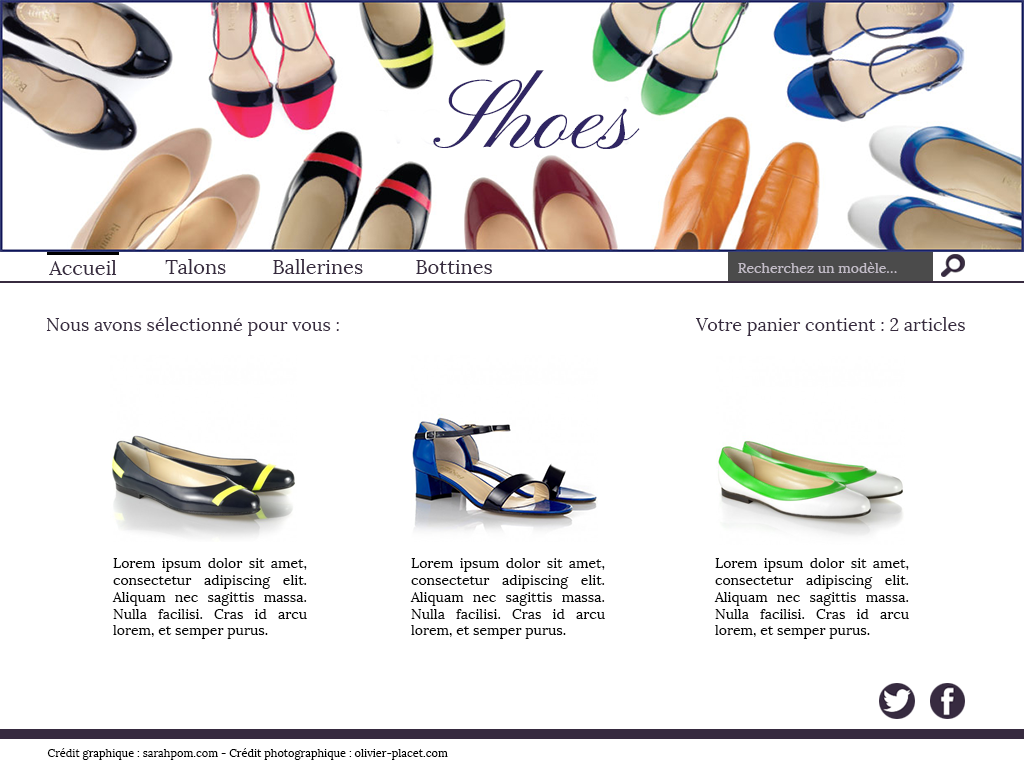
<style>
.page{position:relative;width:1024px;height:768px;background:#ffffff}
.page>*{position:absolute;margin:0}
.t1{font:100px "PinyonScript";color:#302663}
.t2{font:20px "Lora-Regular";color:#372b3f}
.t3{font:14px "Lora-Regular";color:#c2bcc7}
.t4{font:18px "Lora-Regular";color:#372b3f}
.t5{font:14px "Lora-Regular";color:#070707}
.t6{font:11px "Lora-Regular";color:#000000}
</style>
<div class="page">
<p class="t1" style="left:433px;top:70px;width:207px;height:79px">Shoes</p>
<p class="t2" style="left:49px;top:260px;width:68px;height:15px">Accueil</p>
<p class="t2" style="left:165px;top:259px;width:61px;height:15px">Talons</p>
<p class="t2" style="left:273px;top:259px;width:90px;height:15px">Ballerines</p>
<p class="t2" style="left:416px;top:260px;width:76px;height:14px">Bottines</p>
<p class="t3" style="left:738px;top:262px;width:159px;height:11px">Recherchez un modèle…</p>
<p class="t4" style="left:46px;top:317px;width:293px;height:19px">Nous avons sélectionné pour vous :</p>
<p class="t4" style="left:695px;top:317px;width:270px;height:19px">Votre panier contient : 2 articles</p>
<p class="t5" style="left:112px;top:558px;width:195px;height:81px;text-align:justify">Lorem ipsum dolor sit amet, consectetur adipiscing elit. Aliquam nec sagittis massa. Nulla facilisi. Cras id arcu lorem, et semper purus.</p>
<p class="t5" style="left:410px;top:558px;width:195px;height:81px;text-align:justify">Lorem ipsum dolor sit amet, consectetur adipiscing elit. Aliquam nec sagittis massa. Nulla facilisi. Cras id arcu lorem, et semper purus.</p>
<p class="t5" style="left:714px;top:558px;width:195px;height:81px;text-align:justify">Lorem ipsum dolor sit amet, consectetur adipiscing elit. Aliquam nec sagittis massa. Nulla facilisi. Cras id arcu lorem, et semper purus.</p>
<p class="t6" style="left:47px;top:748px;width:401px;height:12px">Crédit graphique : sarahpom.com - Crédit photographique : olivier-placet.com</p>
</div>
